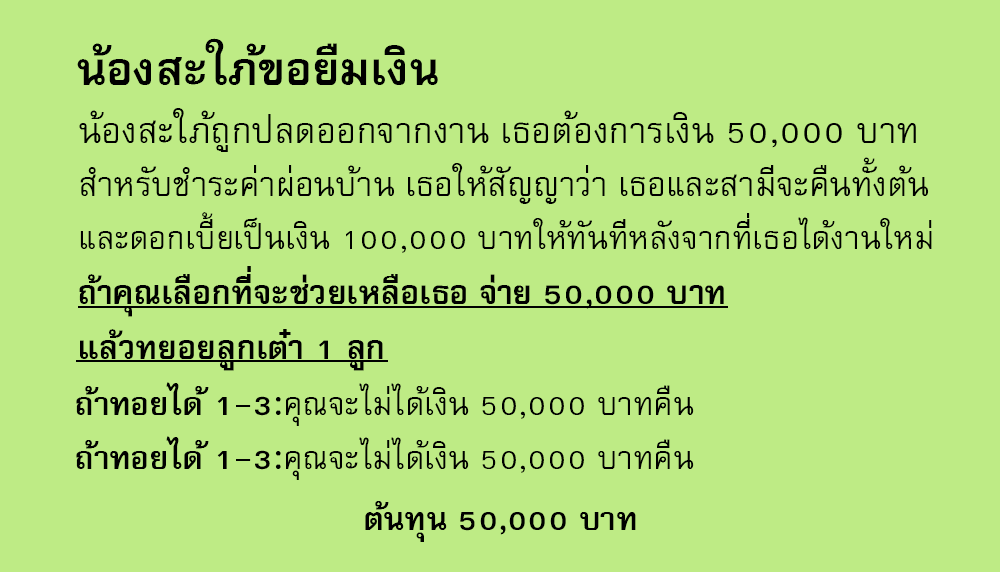
<style>
.page{position:relative;width:1000px;height:572px;background:#beeb85}
.page>*{position:absolute;margin:0}
.t1{font:64px "FreesiaUPCBold";color:#000000}
.t2{font:45px/53px "FreesiaUPC";color:#000000}
.t3{font:50px/53px "FreesiaUPC";color:#000000}
.t4{font:47px/53px "FreesiaUPC";color:#000000}
.t5{font:46px "FreesiaUPCBold";color:#000000}
.t6{font:45px "FreesiaUPC";color:#000000}
.t7{font:45px "FreesiaUPCBold";color:#000000}
</style>
<div class="page">
<p class="t1" style="left:77px;top:38px;width:361px;height:47px">น้องสะใภ้ขอยืมเงิน</p>
<p class="t2" style="left:79px;top:108px;width:853px;height:145px"><span class="t3">น้องสะใภ้ถูกปลดออกจากงาน เธอต้องการเงิน 50,000 บาท<br></span><span class="t4">สำหรับชำระค่าผ่อนบ้าน เธอให้สัญญาว่า เธอและสามีจะคืนทั้งต้น<br></span>และดอกเบี้ยเป็นเงิน 100,000 บาทให้ทันทีหลังจากที่เธอได้งานใหม่</p>
<p class="t5" style="left:79px;top:266px;width:645px;height:105px">ถ้าคุณเลือกที่จะช่วยเหลือเธอ จ่าย 50,000 บาท<br>แล้วทยอยลูกเต๋า 1 ลูก</p>
<p class="t6" style="left:76px;top:382px;width:618px;height:98px"><span class="t7">ถ้าทอยได้ 1-3:</span>คุณจะไม่ได้เงิน 50,000 บาทคืน<br><span class="t7">ถ้าทอยได้ 1-3:</span>คุณจะไม่ได้เงิน 50,000 บาทคืน</p>
<p class="t7" style="left:365px;top:501px;width:271px;height:41px">ต้นทุน 50,000 บาท</p>
</div>
